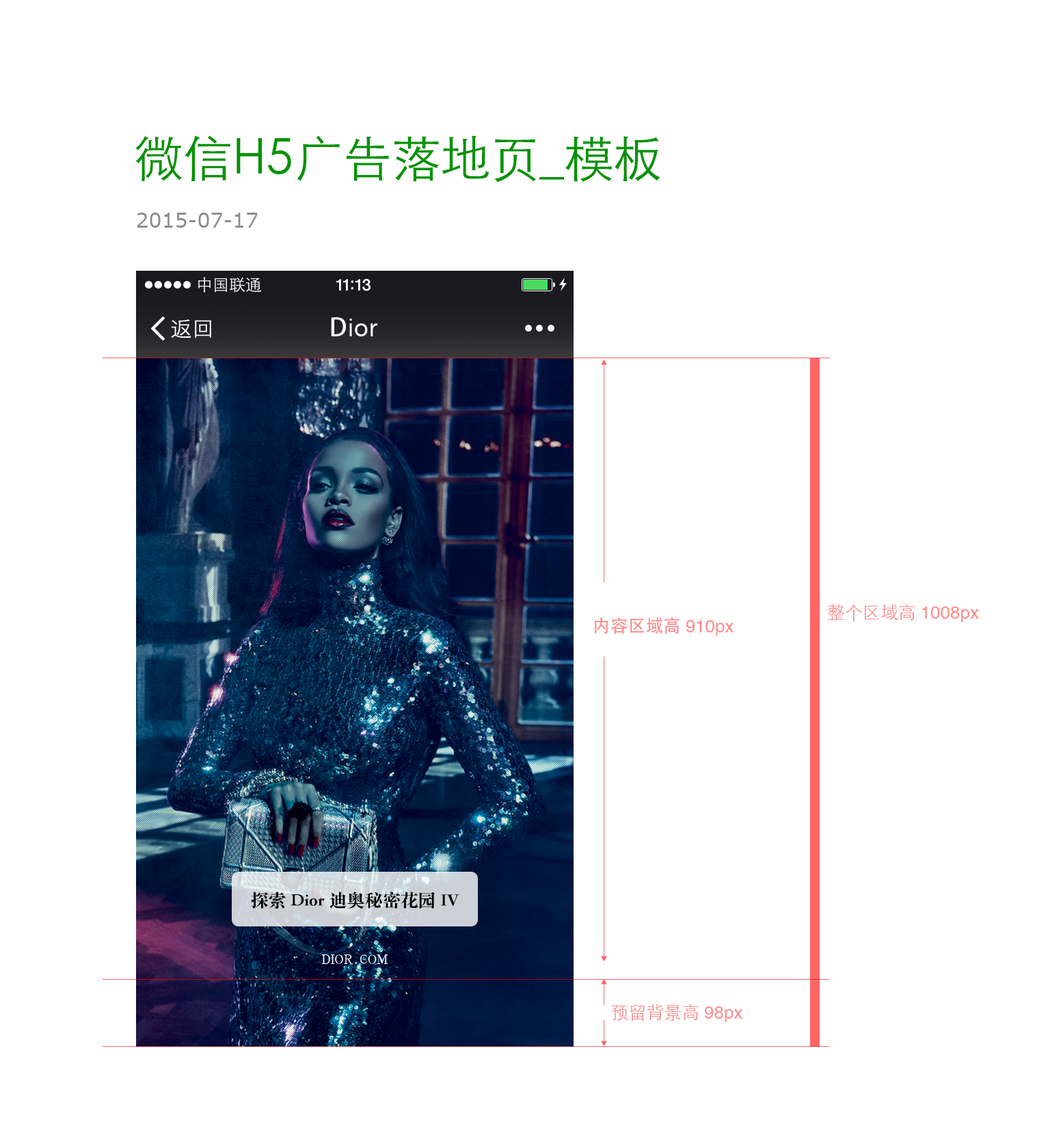
<style>
.page{position:relative;width:1061px;height:1124px;background:#ffffff}
.page>*{position:absolute;margin:0}
.t1{font:49.2px "STXihei";color:#019300}
.t2{font:20.5px "Verdana";color:#8d8d8d}
.t3{font:17.8px "Helvetica";color:#fe8d8d}
.t4{font:17.8px "STHeitiSC-Light";color:#fe8d8d}
.t5{font:17.8px "AdobeHeitiStd-Regular";color:#fe8d8d}
.t6{font:17.8px "STSongti-SC-Black";color:#010101}
</style>
<div class="page">
<p class="t1" style="left:135px;top:135px;width:525px;height:48px">微信H5广告落地页_模板</p>
<p class="t2" style="left:137px;top:213px;width:121px;height:15px">2015-07-17</p>
<p class="t3" style="left:828px;top:604px;width:151px;height:18px"><span class="t4">整个区域高</span>1008px</p>
<p class="t5" style="left:594px;top:617px;width:140px;height:19px">内容区域高<span class="t3">910px</span></p>
<p class="t6" style="left:251px;top:891px;width:208px;height:18px">探索Dior迪奥秘密花园 IV</p>
<p class="t4" style="left:611px;top:1004px;width:131px;height:18px">预留背景高<span class="t3">98px</span></p>
</div>
